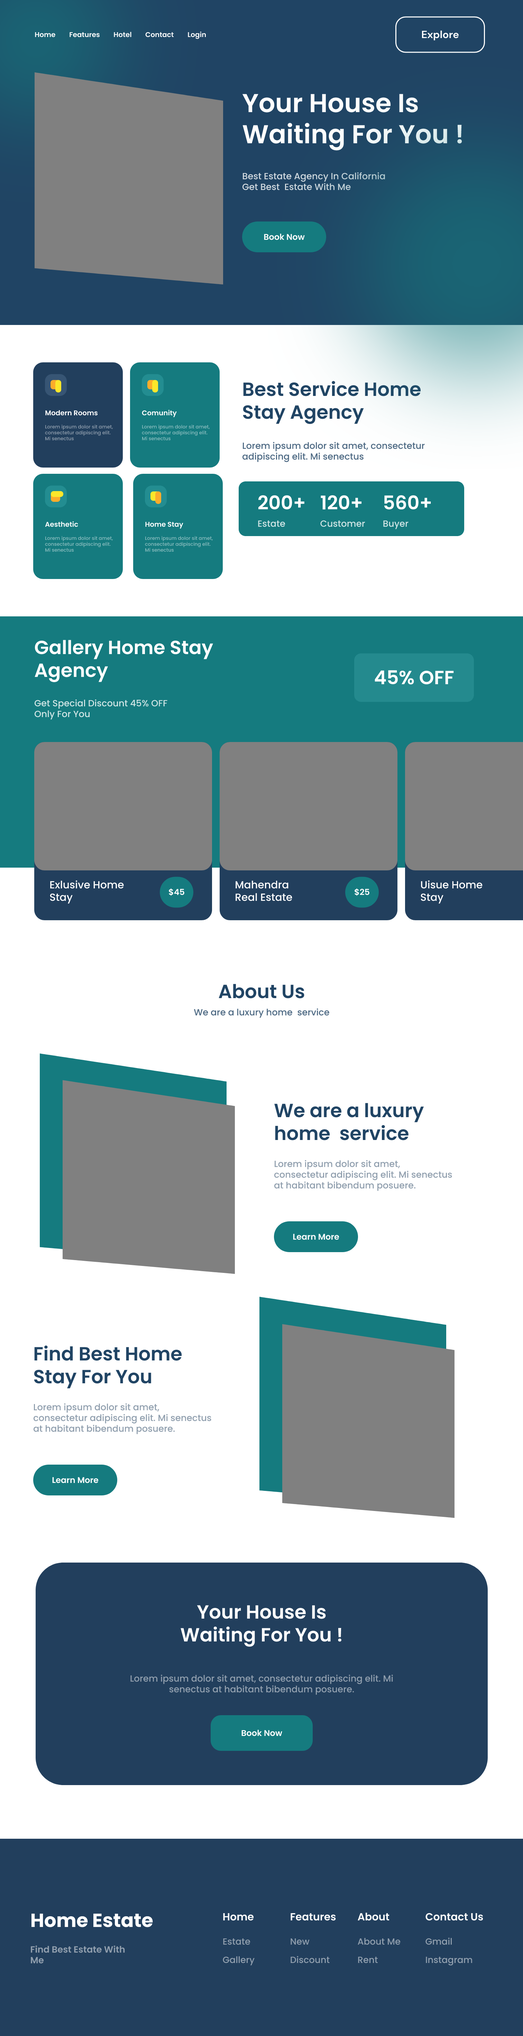
<style>
.page{position:relative;width:523px;height:2036px;background:#ffffff}
.page>*{position:absolute;margin:0}
.t1{font:6.9px "Poppins-SemiBold";color:#ffffff}
.t2{font:10.4px "DMSans-Bold";color:#ffffff}
.t3{font:26px "Poppins-SemiBold";color:#ffffff}
.t4{font:9px "Poppins-Medium";color:#cfd9df}
.t5{font:8.3px "Poppins-SemiBold";color:#ffffff}
.t6{font:19px "Poppins-SemiBold";color:#204464}
.t7{font:4.8px "Poppins-Medium";color:#919fae}
.t8{font:4.8px "Poppins-Medium";color:#8abdbf}
.t9{font:9px "Poppins-Medium";color:#4d6983}
.t10{font:19px "Poppins-SemiBold";color:#ffffff}
.t11{font:9px "Poppins-Medium";color:#d0e5e5}
.t12{font:10.4px "Poppins-Medium";color:#ffffff}
.t13{font:9px "Poppins-Medium";color:#909fae}
.t14{font:9px "Poppins-Medium";color:#919fae}
.t15{font:19px "Poppins-Bold";color:#ffffff}
.t16{font:10.4px "Poppins-SemiBold";color:#ffffff}
.t17{font:9px "Poppins-SemiBold";color:#919fae}
</style>
<div class="page">
<p class="t1" style="left:35px;top:32px;width:20px;height:5px">Home</p>
<p class="t1" style="left:70px;top:32px;width:30px;height:5px">Features</p>
<p class="t1" style="left:114px;top:32px;width:18px;height:5px">Hotel</p>
<p class="t1" style="left:145px;top:32px;width:29px;height:5px">Contact</p>
<p class="t1" style="left:188px;top:32px;width:18px;height:7px">Login</p>
<p class="t2" style="left:422px;top:30px;width:37px;height:10px">Explore</p>
<p class="t3" style="left:242px;top:94px;width:220px;height:57px">Your House Is <br>Waiting For You !</p>
<p class="t4" style="left:242px;top:172px;width:143px;height:18px">Best Estate Agency In California<br>Get Best  Estate With Me</p>
<p class="t5" style="left:264px;top:234px;width:41px;height:6px">Book Now</p>
<p class="t6" style="left:243px;top:381px;width:178px;height:43px">Best Service Home <br>Stay Agency</p>
<p class="t1" style="left:45px;top:410px;width:53px;height:6px">Modern Rooms</p>
<p class="t1" style="left:142px;top:410px;width:35px;height:7px">Comunity</p>
<p class="t7" style="left:45px;top:425px;width:68px;height:16px">Lorem ipsum dolor sit amet, consectetur adipiscing elit. Mi senectus</p>
<p class="t8" style="left:142px;top:425px;width:68px;height:16px">Lorem ipsum dolor sit amet, consectetur adipiscing elit. Mi senectus</p>
<p class="t9" style="left:242px;top:442px;width:183px;height:20px">Lorem ipsum dolor sit amet, consectetur adipiscing elit. Mi senectus</p>
<p class="t10" style="left:258px;top:495px;width:47px;height:15px">200+</p>
<p class="t10" style="left:321px;top:495px;width:41px;height:15px">120+</p>
<p class="t10" style="left:384px;top:495px;width:47px;height:15px">560+</p>
<p class="t1" style="left:45px;top:521px;width:33px;height:6px">Aesthetic</p>
<p class="t1" style="left:145px;top:522px;width:38px;height:7px">Home Stay</p>
<p class="t11" style="left:258px;top:520px;width:28px;height:7px">Estate</p>
<p class="t11" style="left:321px;top:520px;width:44px;height:7px">Customer</p>
<p class="t11" style="left:384px;top:520px;width:25px;height:9px">Buyer</p>
<p class="t8" style="left:45px;top:536px;width:68px;height:16px">Lorem ipsum dolor sit amet, consectetur adipiscing elit. Mi senectus</p>
<p class="t8" style="left:145px;top:536px;width:68px;height:16px">Lorem ipsum dolor sit amet, consectetur adipiscing elit. Mi senectus</p>
<p class="t10" style="left:35px;top:640px;width:178px;height:43px">Gallery Home Stay Agency</p>
<p class="t10" style="left:375px;top:670px;width:79px;height:15px">45% OFF</p>
<p class="t11" style="left:34px;top:699px;width:134px;height:21px">Get Special Discount 45% OFF Only For You</p>
<p class="t12" style="left:50px;top:880px;width:74px;height:24px">Exlusive Home Stay</p>
<p class="t12" style="left:236px;top:881px;width:56px;height:20px">Mahendra <br>Real Estate</p>
<p class="t12" style="left:421px;top:880px;width:62px;height:24px">Uisue Home <br>Stay</p>
<p class="t5" style="left:169px;top:889px;width:15px;height:7px">$45</p>
<p class="t5" style="left:355px;top:889px;width:15px;height:7px">$25</p>
<p class="t6" style="left:219px;top:984px;width:86px;height:15px">About Us</p>
<p class="t9" style="left:194px;top:1008px;width:136px;height:10px">We are a luxury home  service</p>
<p class="t6" style="left:274px;top:1103px;width:150px;height:38px">We are a luxury home  service</p>
<p class="t13" style="left:274px;top:1160px;width:178px;height:31px">Lorem ipsum dolor sit amet, consectetur adipiscing elit. Mi senectus at habitant bibendum posuere.</p>
<p class="t5" style="left:293px;top:1234px;width:47px;height:6px">Learn More</p>
<p class="t6" style="left:34px;top:1346px;width:148px;height:43px">Find Best Home Stay For You</p>
<p class="t13" style="left:33px;top:1403px;width:179px;height:31px">Lorem ipsum dolor sit amet, consectetur adipiscing elit. Mi senectus at habitant bibendum posuere.</p>
<p class="t5" style="left:52px;top:1477px;width:47px;height:7px">Learn More</p>
<p class="t10" style="left:181px;top:1605px;width:161px;height:42px;text-align:center">Your House Is <br>Waiting For You !</p>
<p class="t14" style="left:130px;top:1675px;width:263px;height:20px;text-align:center">Lorem ipsum dolor sit amet, consectetur adipiscing elit. Mi senectus at habitant bibendum posuere.</p>
<p class="t5" style="left:242px;top:1730px;width:40px;height:7px">Book Now</p>
<p class="t15" style="left:31px;top:1914px;width:122px;height:14px">Home Estate</p>
<p class="t16" style="left:223px;top:1914px;width:31px;height:7px">Home</p>
<p class="t16" style="left:291px;top:1914px;width:45px;height:7px">Features</p>
<p class="t16" style="left:358px;top:1913px;width:31px;height:8px">About</p>
<p class="t16" style="left:426px;top:1913px;width:58px;height:8px">Contact Us</p>
<p class="t14" style="left:426px;top:1938px;width:26px;height:7px">Gmail</p>
<p class="t17" style="left:31px;top:1946px;width:94px;height:18px">Find Best Estate With<br>Me</p>
<p class="t14" style="left:223px;top:1938px;width:28px;height:7px">Estate</p>
<p class="t14" style="left:291px;top:1938px;width:19px;height:7px">New</p>
<p class="t14" style="left:358px;top:1938px;width:43px;height:7px">About Me</p>
<p class="t14" style="left:223px;top:1956px;width:32px;height:10px">Gallery</p>
<p class="t14" style="left:291px;top:1956px;width:39px;height:8px">Discount</p>
<p class="t14" style="left:358px;top:1957px;width:20px;height:7px">Rent</p>
<p class="t14" style="left:426px;top:1957px;width:46px;height:9px">Instagram</p>
</div>
